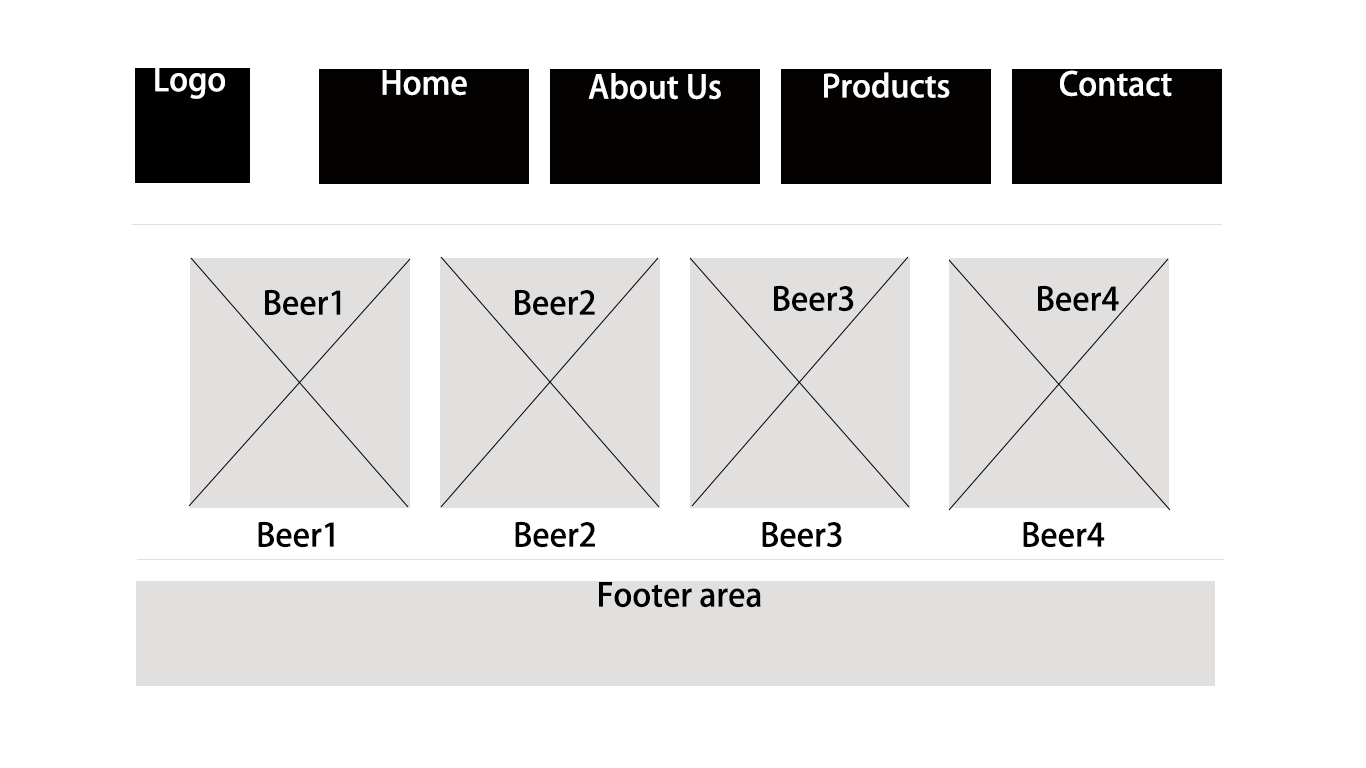
<style>
.page{position:relative;width:1366px;height:768px;background:#ffffff}
.page>*{position:absolute;margin:0}
.t1{font:32px "AdobeHeitiStd-Regular";color:#fffefe}
.t2{font:32px "AdobeHeitiStd-Regular";color:#ffffff}
.t3{font:30.7px "AdobeHeitiStd-Regular";color:#ffffff;scale:1.04 1}
.t4{font:32px "AdobeHeitiStd-Regular";color:#000000}
</style>
<div class="page">
<p class="t1" style="left:155px;top:66px;width:70px;height:33px">Logo</p>
<p class="t2" style="left:382px;top:70px;width:85px;height:26px">Home</p>
<p class="t2" style="left:588px;top:73px;width:133px;height:27px">About Us</p>
<p class="t3" style="left:824px;top:72px;width:126px;height:26px">Products</p>
<p class="t2" style="left:1060px;top:70px;width:112px;height:27px">Contact</p>
<p class="t4" style="left:265px;top:289px;width:76px;height:27px">Beer1</p>
<p class="t4" style="left:515px;top:289px;width:80px;height:27px">Beer2</p>
<p class="t4" style="left:774px;top:285px;width:80px;height:27px">Beer3</p>
<p class="t4" style="left:1038px;top:285px;width:81px;height:27px">Beer4</p>
<p class="t4" style="left:258px;top:521px;width:76px;height:27px">Beer1</p>
<p class="t4" style="left:515px;top:521px;width:80px;height:27px">Beer2</p>
<p class="t4" style="left:762px;top:521px;width:80px;height:27px">Beer3</p>
<p class="t4" style="left:1023px;top:521px;width:82px;height:27px">Beer4</p>
<p class="t4" style="left:599px;top:582px;width:162px;height:26px">Footer area</p>
</div>
